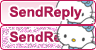
<style>
.page{position:relative;width:96px;height:50px;background:#ffffff}
.page>*{position:absolute;margin:0}
.t1{font:14px "Arial-BoldMT";color:#ad194f}
</style>
<div class="page">
<p class="t1" style="left:9px;top:6px;width:73px;height:14px">SendReply</p>
<p class="t1" style="left:9px;top:31px;width:73px;height:14px">SendReply</p>
</div>
